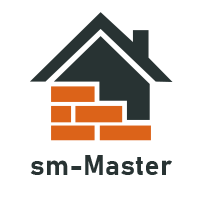
<style>
.page{position:relative;width:200px;height:200px;background:#ffffff}
.page>*{position:absolute;margin:0}
.t1{font:28px "Bahnschrift-Bold";letter-spacing:0.01em;color:#283333}
</style>
<div class="page">
<p class="t1" style="left:30px;top:155px;width:142px;height:20px">sm-Master</p>
</div>
